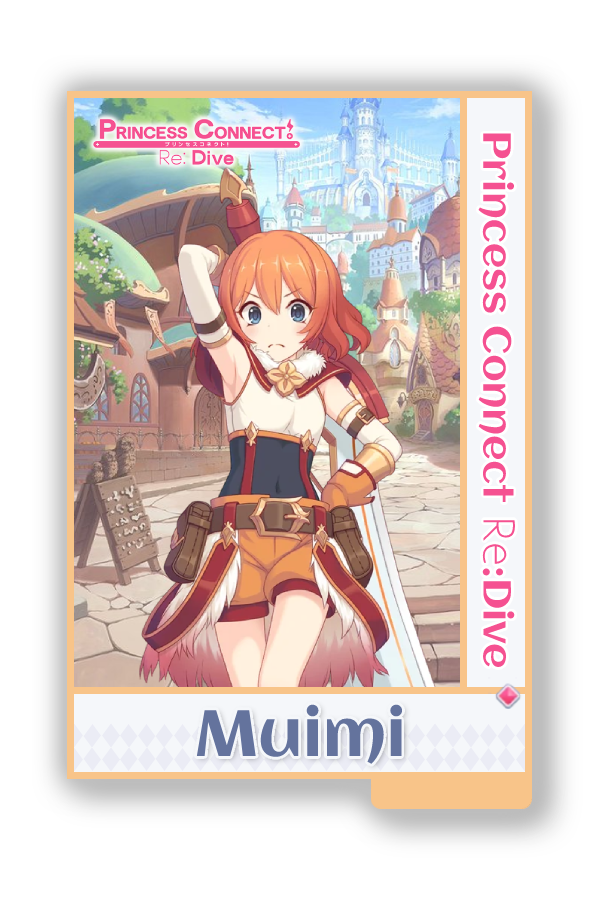
<style>
.page{position:relative;width:600px;height:900px;background:#ffffff}
.page>*{position:absolute;margin:0}
.t1{font:39px "Aclonica-Regular";color:#f55191}
.t2{font:39px "AaarghNormal";color:#f55191}
.t3{font:65px "Aclonica-Regular";color:#64739d}
</style>
<div class="page">
<p class="t1" style="left:478px;top:133px;width:38px;height:534px;rotate:90deg">Princess Connect <span class="t2">Re</span>:Dive</p>
<p class="t3" style="left:196px;top:704px;width:207px;height:60px">Muimi</p>
</div>
